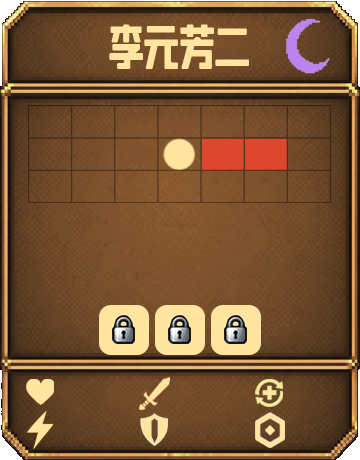
<style>
.page{position:relative;width:360px;height:460px}
.page>*{position:absolute;margin:0}
.t1{font:48px "LEEFONTMENGHEI";letter-spacing:-0.06em;color:#ffe59f}
</style>
<div class="page">
<p class="t1" style="left:109px;top:24px;width:140px;height:45px">李元芳二</p>
</div>
